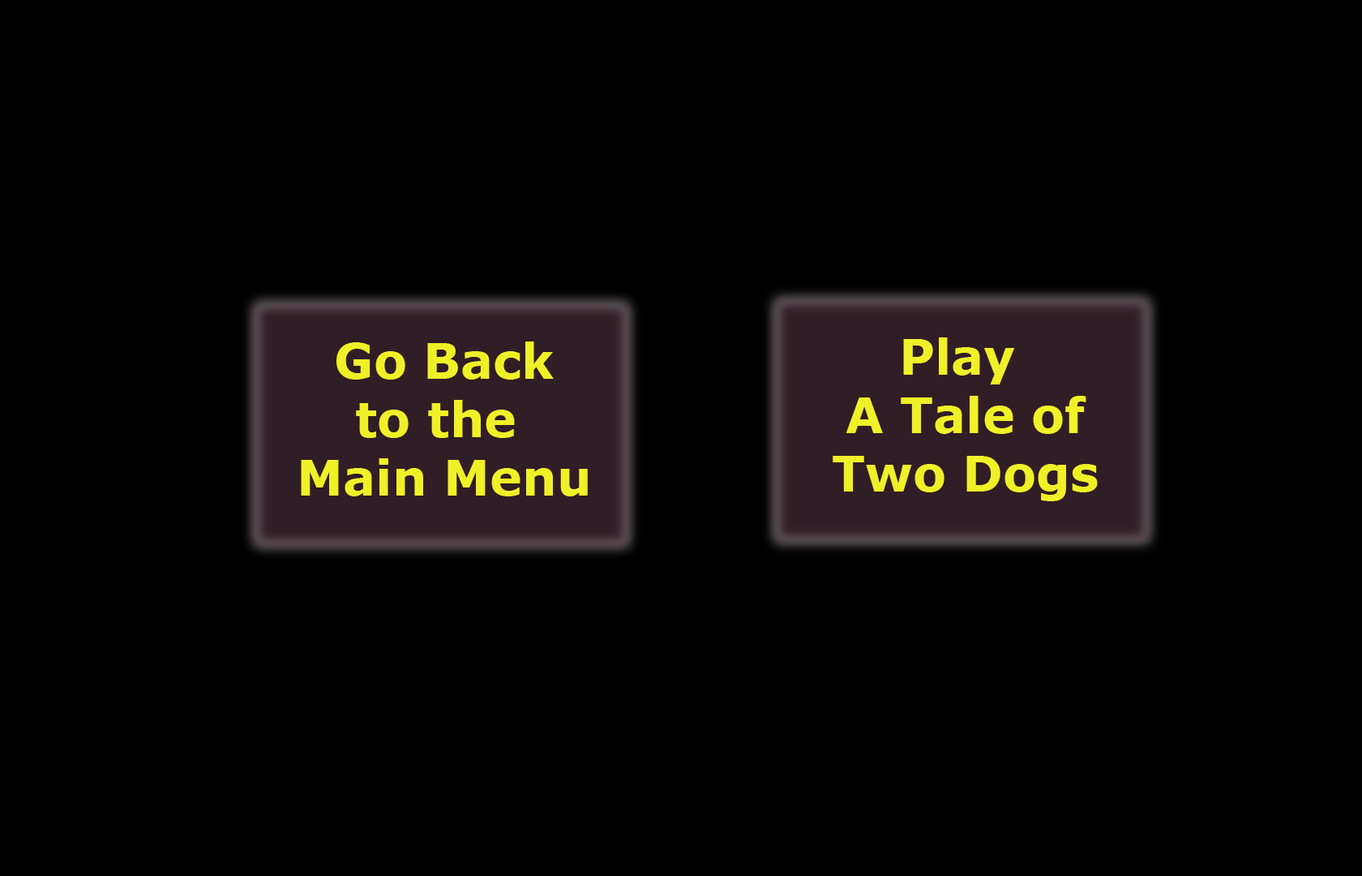
<style>
.page{position:relative;width:1362px;height:876px;background:#000000}
.page>*{position:absolute;margin:0}
.t1{font:48.6px "Verdana-Bold";color:#eff128}
</style>
<div class="page">
<p class="t1" style="left:301px;top:341px;width:287px;height:155px;text-align:center">Go Back<br>to the <br>Main Menu</p>
<p class="t1" style="left:833px;top:337px;width:265px;height:164px;text-align:center">Play <br>A Tale of<br>Two Dogs</p>
</div>
